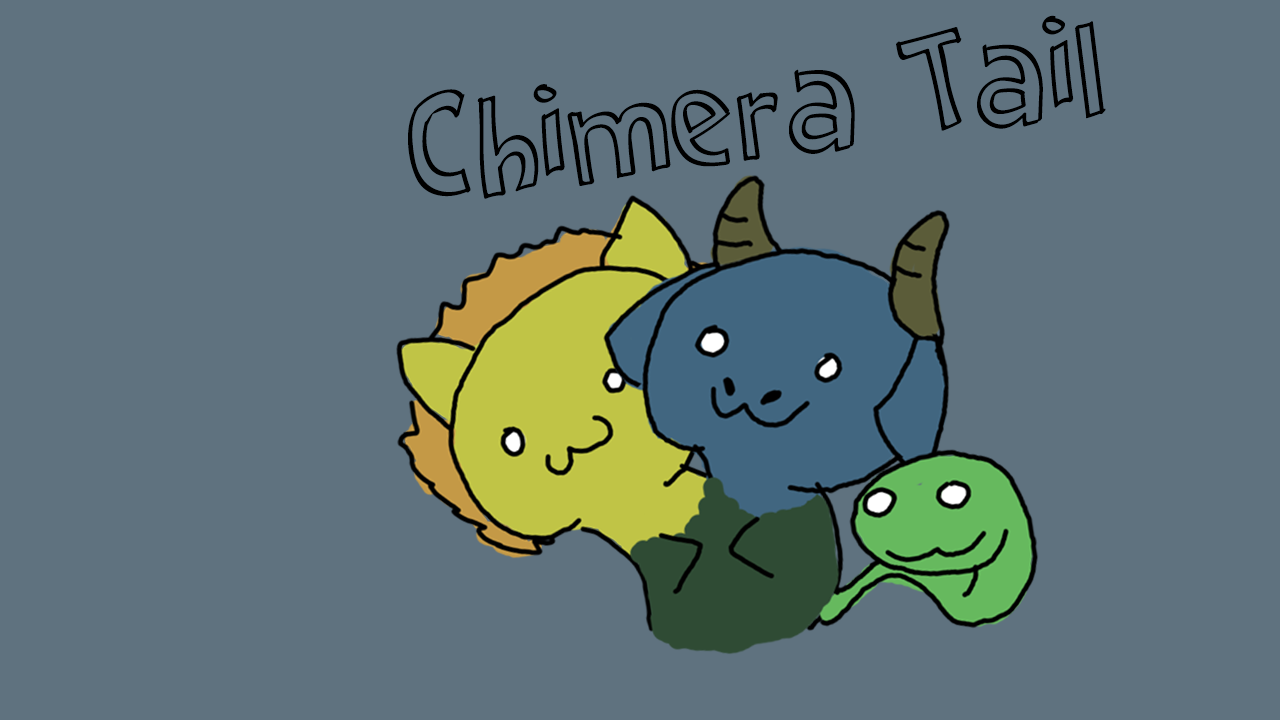
<style>
.page{position:relative;width:1280px;height:720px;background:#5f727f}
.page>*{position:absolute;margin:0}
.t1{font:172px "Cartoon2Package";color:#000000}
</style>
<div class="page">
<p class="t1" style="left:408px;top:15px;width:698px;height:184px;rotate:-8deg">Chimera Tail</p>
</div>
